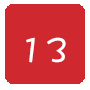
<style>
.page{position:relative;width:90px;height:90px;background:#cf282f}
.page>*{position:absolute;margin:0}
.t1{font:36px "DFWaWaSC-W5";color:#ffffff}
</style>
<div class="page">
<p class="t1" style="left:26px;top:37px;width:40px;height:26px">13</p>
</div>
